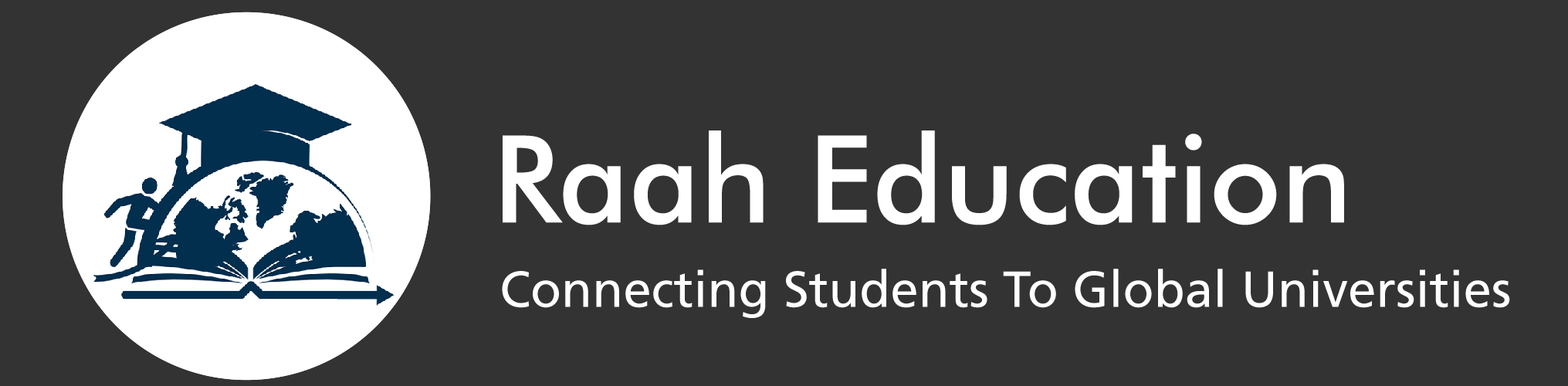
<style>
.page{position:relative;width:1568px;height:386px;background:#333333}
.page>*{position:absolute;margin:0}
.t1{font:121.5px "FuturaBT-Medium";color:#ffffff}
.t2{font:50.6px "Frutiger-Roman";color:#ffffff}
</style>
<div class="page">
<p class="t1" style="left:503px;top:130px;width:841px;height:95px">Raah Education</p>
<p class="t2" style="left:502px;top:269px;width:1008px;height:49px">Connecting Students To Global Universities</p>
</div>
